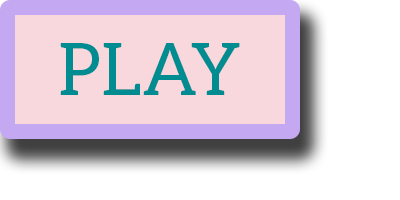
<style>
.page{position:relative;width:400px;height:200px;background:#f8d8dd}
.page>*{position:absolute;margin:0}
.t1{font:72px "Aleo-Regular";color:#008c90}
</style>
<div class="page">
<p class="t1" style="left:60px;top:43px;width:180px;height:52px">PLAY</p>
</div>
